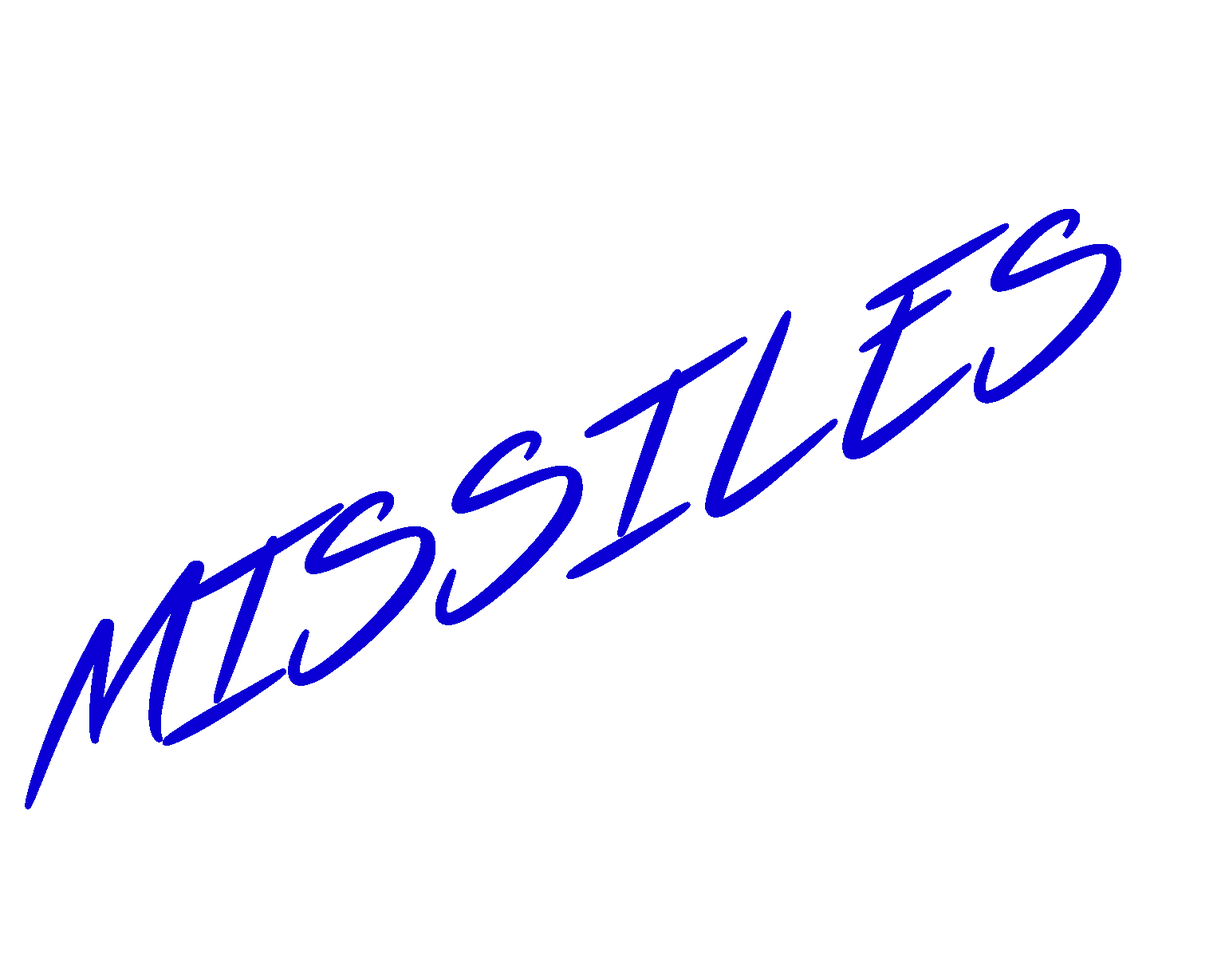
<style>
.page{position:relative;width:1225px;height:973px;background:#ffffff}
.page>*{position:absolute;margin:0}
.t1{font:142.9px "Streamster";color:#0a00d5;font-weight:bold;scale:1.12 1}
</style>
<div class="page">
<p class="t1" style="left:25px;top:209px;width:1097px;height:601px;rotate:-22deg">MISSILES</p>
</div>
